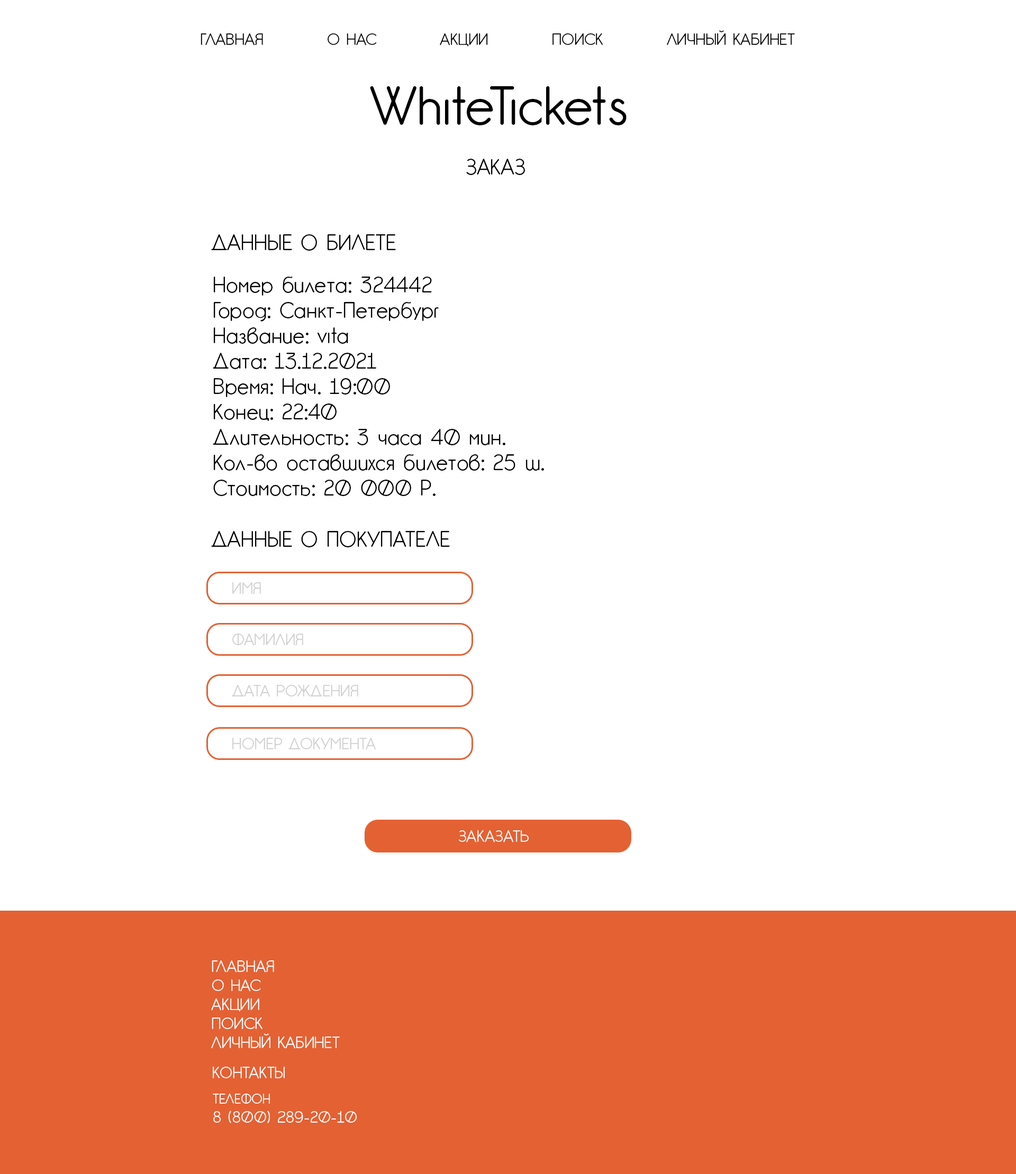
<style>
.page{position:relative;width:1016px;height:1174px;background:#ffffff}
.page>*{position:absolute;margin:0}
.t1{font:15.9px "GardensC";color:#000000}
.t2{font:52.9px "GardensC";color:#000000}
.t3{font:21.2px "GardensC";color:#000000}
.t4{font:15.9px "GardensC";color:#d0d0d0}
.t5{font:15.9px "GardensC";color:#ffffff}
.t6{font:13.2px "GardensC";color:#ffffff}
</style>
<div class="page">
<p class="t1" style="left:200px;top:30px;width:594px;height:17px">ГЛАВНАЯ          О НАС          АКЦИИ          ПОИСК          ЛИЧНЫЙ КАБИНЕТ</p>
<p class="t2" style="left:370px;top:86px;width:256px;height:39px">WhiteTickets</p>
<p class="t3" style="left:466px;top:159px;width:59px;height:16px">ЗАКАЗ</p>
<p class="t3" style="left:211px;top:234px;width:185px;height:17px">ДАННЫЕ О БИЛЕТЕ</p>
<p class="t3" style="left:213px;top:276px;width:331px;height:220px">Номер билета: 324442<br>Город: Санкт-Петербург<br>Название: vita<br>Дата: 13.12.2021<br>Время: Нач. 19:00<br>Конец: 22:40<br>Длительность: 3 часа 40 мин.<br>Кол-во оставшихся билетов: 25 ш.<br>Стоимость: 20 000 Р.</p>
<p class="t3" style="left:211px;top:531px;width:239px;height:16px">ДАННЫЕ О ПОКУПАТЕЛЕ</p>
<p class="t4" style="left:232px;top:582px;width:29px;height:12px">ИМЯ</p>
<p class="t4" style="left:232px;top:633px;width:71px;height:13px">ФАМИЛИЯ</p>
<p class="t4" style="left:232px;top:684px;width:126px;height:13px">ДАТА РОЖДЕНИЯ</p>
<p class="t4" style="left:232px;top:737px;width:144px;height:13px">НОМЕР ДОКУМЕНТА</p>
<p class="t5" style="left:459px;top:830px;width:69px;height:13px">ЗАКАЗАТЬ</p>
<p class="t5" style="left:211px;top:961px;width:129px;height:88px">ГЛАВНАЯ<br>О НАС<br>АКЦИИ<br>ПОИСК<br>ЛИЧНЫЙ КАБИНЕТ</p>
<p class="t5" style="left:213px;top:1066px;width:72px;height:13px">КОНТАКТЫ</p>
<p class="t5" style="left:213px;top:1094px;width:144px;height:29px"><span class="t6">ТЕЛЕФОН<br></span>8 (800) 289-20-10</p>
</div>
